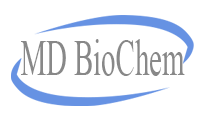
<style>
.page{position:relative;width:200px;height:120px;background:#ffffff}
.page>*{position:absolute;margin:0}
.t1{font:51.4px "TimesNewRomanPSMT";color:#888888;scale:0.56 1}
</style>
<div class="page">
<p class="t1" style="left:21px;top:39px;width:164px;height:37px">MD BioChem</p>
</div>
